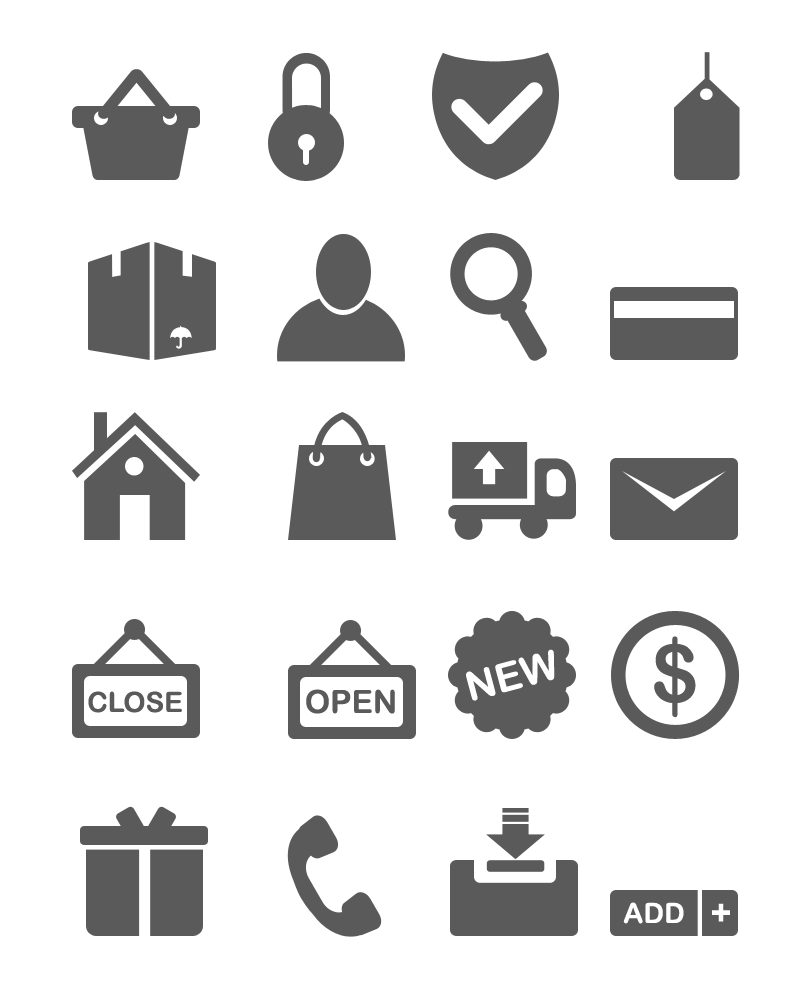
<style>
.page{position:relative;width:800px;height:1000px;background:#ffffff}
.page>*{position:absolute;margin:0}
.t1{font:80px "ArialRoundedMTBold";color:#5a5a5a;text-transform:uppercase}
.t2{font:40px "ArialRoundedMTBold";color:#ffffff;text-transform:uppercase}
.t3{font:32px "ArialRoundedMTBold";color:#5a5a5a;text-transform:uppercase}
.t4{font:28px "ArialRoundedMTBold";color:#5a5a5a;text-transform:uppercase}
.t5{font:28px "ArialRoundedMTBold";color:#ffffff;text-transform:uppercase}
.t6{font:35px "ArialRoundedMTBold";color:#ffffff;text-transform:uppercase}
</style>
<div class="page">
<p class="t1" style="left:654px;top:636px;width:42px;height:82px">$</p>
<p class="t2" style="left:466px;top:649px;width:89px;height:52px;rotate:-15deg">New</p>
<p class="t3" style="left:306px;top:689px;width:89px;height:25px">OPEN</p>
<p class="t4" style="left:88px;top:691px;width:94px;height:22px">close</p>
<p class="t5" style="left:623px;top:902px;width:61px;height:22px">Add</p>
<p class="t6" style="left:712px;top:903px;width:18px;height:19px">+</p>
</div>
